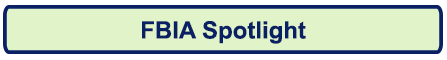
<style>
.page{position:relative;width:447px;height:60px;background:#e1f3c9}
.page>*{position:absolute;margin:0}
.t1{font:24px "Arial-BoldMT";color:#0a2064}
</style>
<div class="page">
<p class="t1" style="left:142px;top:21px;width:164px;height:23px">FBIA Spotlight</p>
</div>
